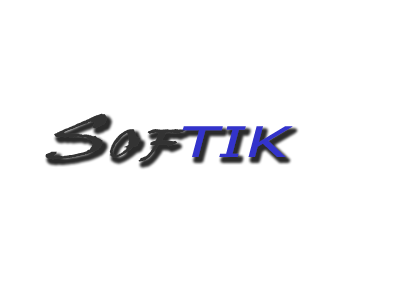
<style>
.page{position:relative;width:400px;height:300px;background:#ffffff}
.page>*{position:absolute;margin:0}
.t1{font:60px "VinerHandITC";letter-spacing:0.01em;color:#333333;font-variant:small-caps;font-style:italic;scale:1.5 1}
.t2{font:60px "Verdana";letter-spacing:0.01em;color:#3333cc;font-variant:small-caps;font-style:italic;scale:1.5 1}
</style>
<div class="page">
<p class="t1" style="left:45px;top:113px;width:248px;height:49px">Sof<span class="t2">tik</span></p>
</div>
